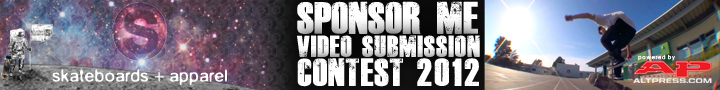
<style>
.page{position:relative;width:720px;height:90px}
.page>*{position:absolute;margin:0}
.t1{font:31.6px "DeadKansas";color:#ffffff}
.t2{font:21px "DeadKansas";letter-spacing:-0.005em;color:#ffffff}
.t3{font:5.5px "Gaussian-Blur-Regular";letter-spacing:0.1em;color:#ffffff}
.t4{font:27.2px "DeadKansas";letter-spacing:-0.005em;color:#ffffff}
.t5{font:27.2px "DeadKansas";letter-spacing:0.075em;color:#ffffff}
.t6{font:16.8px "Gaussian-Blur-Regular";letter-spacing:-0.025em;color:#ffffff}
.t7{font:16.8px "MyriadPro-Regular";letter-spacing:-0.025em;color:#ffffff}
</style>
<div class="page">
<p class="t1" style="left:297px;top:1px;width:181px;height:33px">SPONSOR me</p>
<p class="t2" style="left:297px;top:35px;width:183px;height:22px">video submission</p>
<p class="t3" style="left:638px;top:54px;width:37px;height:7px">powered by</p>
<p class="t4" style="left:297px;top:58px;width:182px;height:29px">contest <span class="t5">2012</span></p>
<p class="t6" style="left:52px;top:69px;width:175px;height:16px">skateboards <span class="t7">+  </span>apparel</p>
</div>
